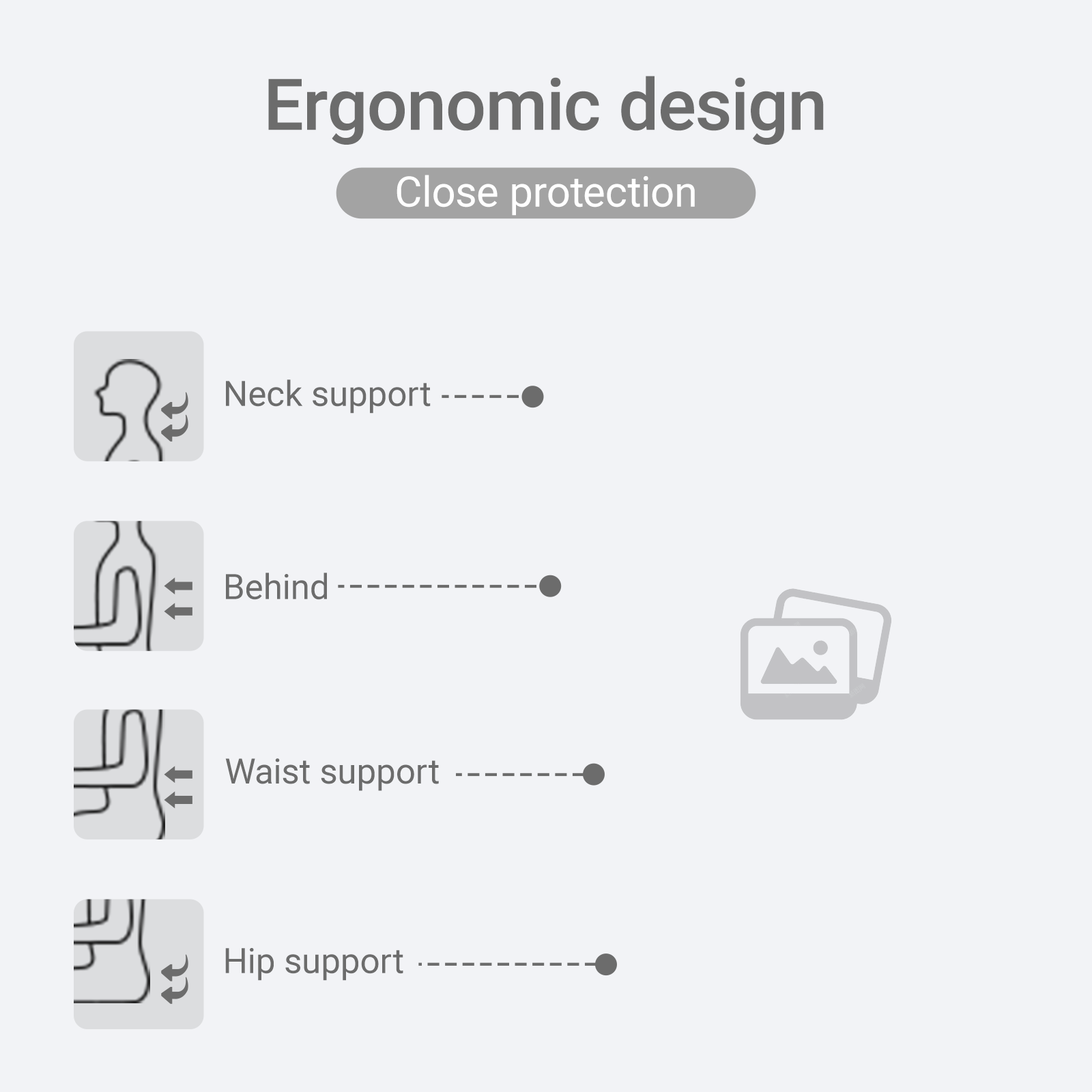
<style>
.page{position:relative;width:1092px;height:1092px;background:#f2f3f6}
.page>*{position:absolute;margin:0}
.t1{font:71.3px "Roboto-Medium";color:#6c6c6c}
.t2{font:42.2px "Roboto-Regular";color:#ffffff}
.t3{font:34.9px "Roboto-Regular";color:#6c6c6c}
</style>
<div class="page">
<p class="t1" style="left:268px;top:76px;width:556px;height:69px">Ergonomic design</p>
<p class="t2" style="left:397px;top:175px;width:298px;height:41px">Close protection</p>
<p class="t3" style="left:226px;top:379px;width:205px;height:35px">Neck support</p>
<p class="t3" style="left:226px;top:573px;width:101px;height:27px">Behind</p>
<p class="t3" style="left:225px;top:758px;width:214px;height:33px">Waist support</p>
<p class="t3" style="left:225px;top:948px;width:178px;height:33px">Hip support</p>
</div>
